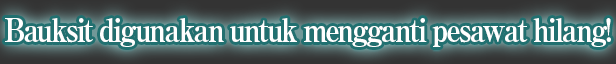
<style>
.page{position:relative;width:616px;height:64px}
.page>*{position:absolute;margin:0}
.t1{font:32px "RyuminPro-ExBold";letter-spacing:-0.08em;color:#ffffff;scale:0.9 1}
</style>
<div class="page">
<p class="t1" style="left:5px;top:18px;width:606px;height:29px">Bauksit digunakan untuk mengganti pesawat hilang!</p>
</div>
